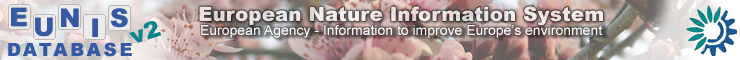
<style>
.page{position:relative;width:740px;height:60px}
.page>*{position:absolute;margin:0}
.t1{font:20px "Arial-Black";color:#ece3e2}
.t2{font:26px "Arial-Black";color:#3559a5}
.t3{font:23.1px "Arial-Black";color:#08868c;scale:1.04 1}
.t4{font:14px "ArialMT";color:#ffffff}
.t5{font:18px "Arial-Black";letter-spacing:0.16em;color:#3559a5}
</style>
<div class="page">
<p class="t1" style="left:199px;top:6px;width:404px;height:20px">European Nature Information System</p>
<p class="t2" style="left:11px;top:7px;width:16px;height:20px">E</p>
<p class="t2" style="left:35px;top:17px;width:18px;height:20px">U</p>
<p class="t2" style="left:61px;top:8px;width:18px;height:19px">N</p>
<p class="t2" style="left:110px;top:8px;width:18px;height:20px">S</p>
<p class="t2" style="left:92px;top:18px;width:6px;height:19px">I</p>
<p class="t3" style="left:129px;top:21px;width:33px;height:22px;rotate:-17deg">v2</p>
<p class="t4" style="left:201px;top:25px;width:402px;height:13px">European Agency - Information to improve Europe’s environment</p>
<p class="t5" style="left:8px;top:42px;width:124px;height:15px">DATABASE</p>
</div>
